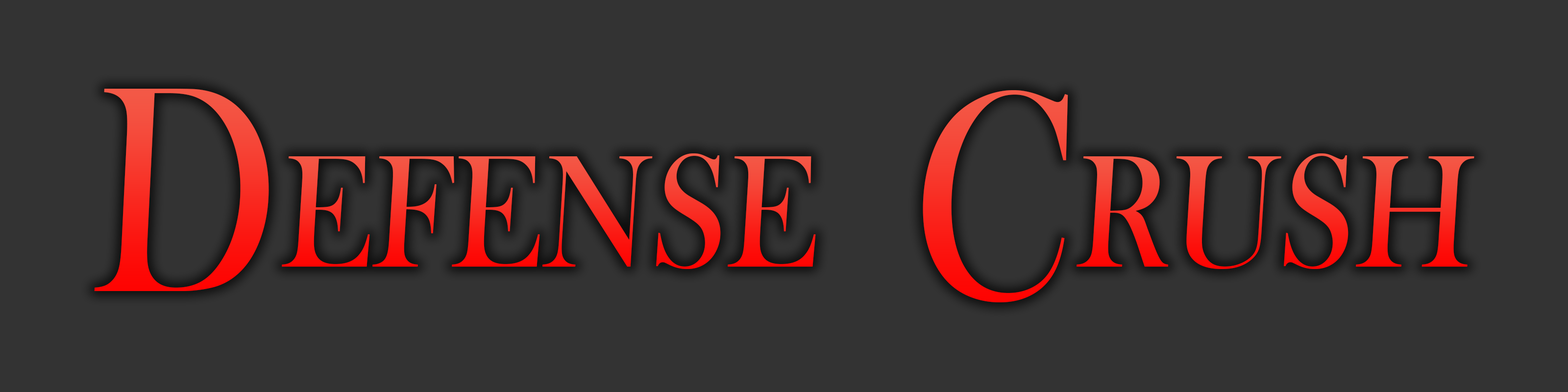
<style>
.page{position:relative;width:1568px;height:392px;background:#333333}
.page>*{position:absolute;margin:0}
.t1{font:304.2px "BaskOldFace";scale:0.79 1}
.t2{font:165.3px "BaskOldFace";scale:0.88 1}
</style>
<div class="page">
<p class="t1" style="left:94px;top:89px;width:175px;height:202px">D</p>
<p class="t1" style="left:923px;top:90px;width:145px;height:212px">C</p>
<p class="t2" style="left:282px;top:153px;width:534px;height:116px">EFENSE</p>
<p class="t2" style="left:1077px;top:153px;width:397px;height:116px">RUSH</p>
</div>
